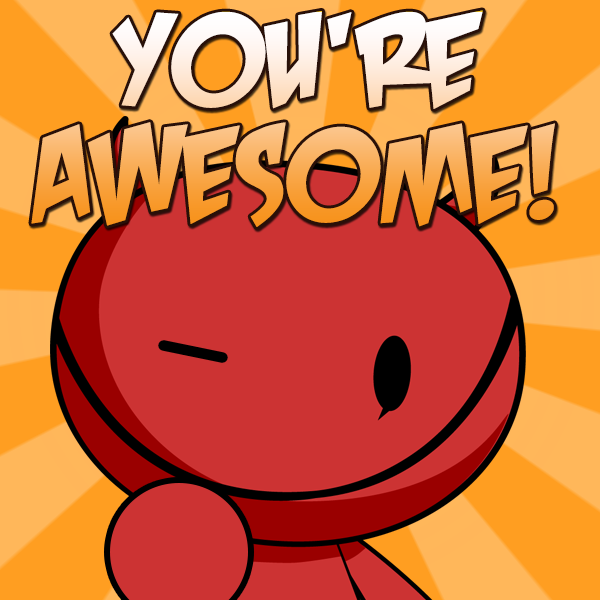
<style>
.page{position:relative;width:600px;height:600px;background:#cc3333}
.page>*{position:absolute;margin:0}
.t1{font:183.8px/114.9px "CrashLandingBB"}
</style>
<div class="page">
<p class="t1" style="left:31px;top:10px;width:524px;height:217px;text-align:center">You‘re<br>awesome!</p>
</div>
